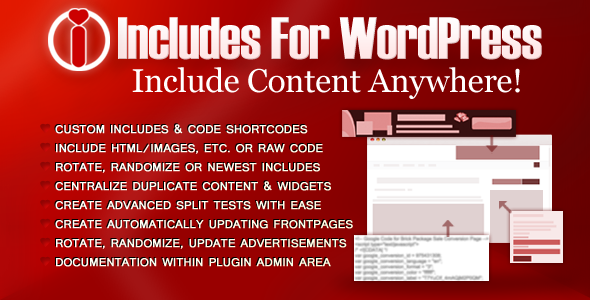
<style>
.page{position:relative;width:590px;height:300px}
.page>*{position:absolute;margin:0}
.t1{font:59.5px "Haettenschweiler";letter-spacing:-0.01em;color:#ffffff}
.t2{font:32.9px "Georgia";letter-spacing:-0.01em;color:#ffffff}
.t3{font:12px/19px "Shruti";color:#ffffff;font-weight:bold}
</style>
<div class="page">
<p class="t1" style="left:118px;top:17px;width:424px;height:43px">Includes For WordPress</p>
<p class="t2" style="left:132px;top:67px;width:388px;height:32px">Include Content Anywhere!</p>
<p class="t3" style="left:55px;top:124px;width:298px;height:143px">CUSTOM INCLUDES &amp; CODE SHORTCODES<br>INCLUDE HTML/IMAGES, ETC. OR RAW CODE<br>ROTATE, RANDOMIZE OR NEWEST INCLUDES<br>CENTRALIZE DUPLICATE CONTENT &amp; WIDGETS<br>CREATE ADVANCED SPLIT TESTS WITH EASE<br>CREATE AUTOMATICALLY UPDATING FRONTPAGES<br>ROTATE, RANDOMIZE, UPDATE ADVERTISEMENTS<br>DOCUMENTATION WITHIN PLUGIN ADMIN AREA</p>
</div>
